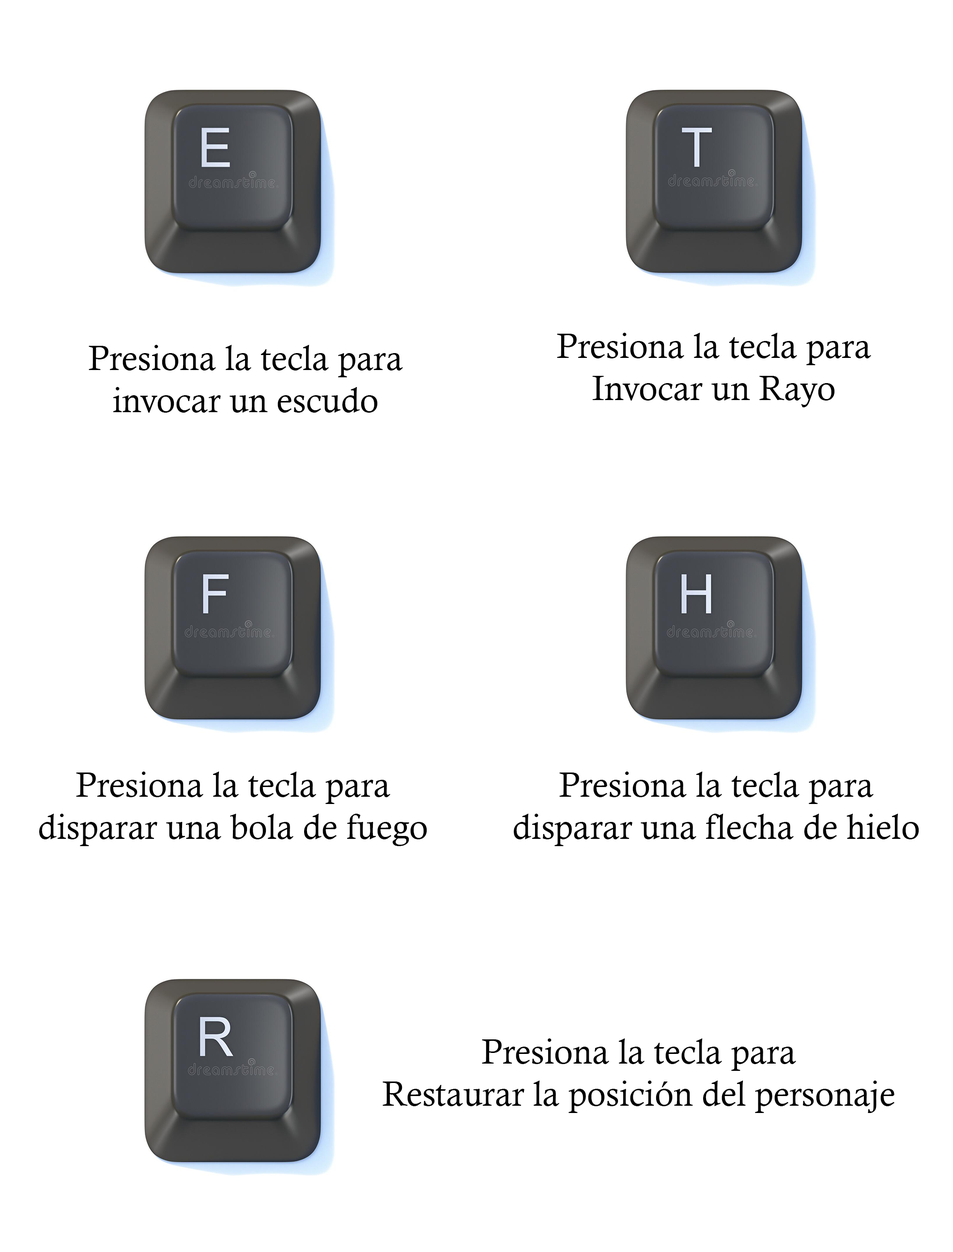
<style>
.page{position:relative;width:953px;height:1252px;background:#ffffff}
.page>*{position:absolute;margin:0}
.t1{font:34.9px "CalistoMT";color:#000000}
</style>
<div class="page">
<p class="t1" style="left:557px;top:333px;width:314px;height:74px;text-align:center">Presiona la tecla para<br>Invocar un Rayo</p>
<p class="t1" style="left:89px;top:345px;width:314px;height:67px;text-align:center">Presiona la tecla para<br>invocar un escudo</p>
<p class="t1" style="left:39px;top:771px;width:388px;height:75px;text-align:center">Presiona la tecla para<br>disparar una bola de fuego</p>
<p class="t1" style="left:514px;top:771px;width:405px;height:75px;text-align:center">Presiona la tecla para<br>disparar una flecha de hielo</p>
<p class="t1" style="left:382px;top:1038px;width:512px;height:75px;text-align:center">Presiona la tecla para<br>Restaurar la posición del personaje</p>
</div>
